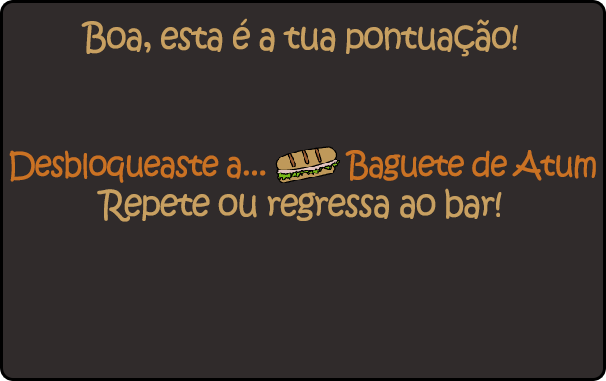
<style>
.page{position:relative;width:606px;height:381px;background:#302b2b}
.page>*{position:absolute;margin:0}
.t1{font:60.2px "KristenITC-Regular";letter-spacing:-0.06em;color:#c8a061;font-weight:bold;scale:0.94 1}
.t2{font:55.6px "KristenITC-Regular";letter-spacing:-0.06em;color:#ca7223;font-weight:bold;scale:0.94 1}
</style>
<div class="page">
<p class="t1" style="left:81px;top:18px;width:437px;height:39px">Boa, esta é a tua pontuação!</p>
<p class="t2" style="left:9px;top:150px;width:587px;height:33px">Desbloqueaste a...          Baguete de Atum</p>
<p class="t1" style="left:97px;top:188px;width:405px;height:34px">Repete ou regressa ao bar!</p>
</div>
